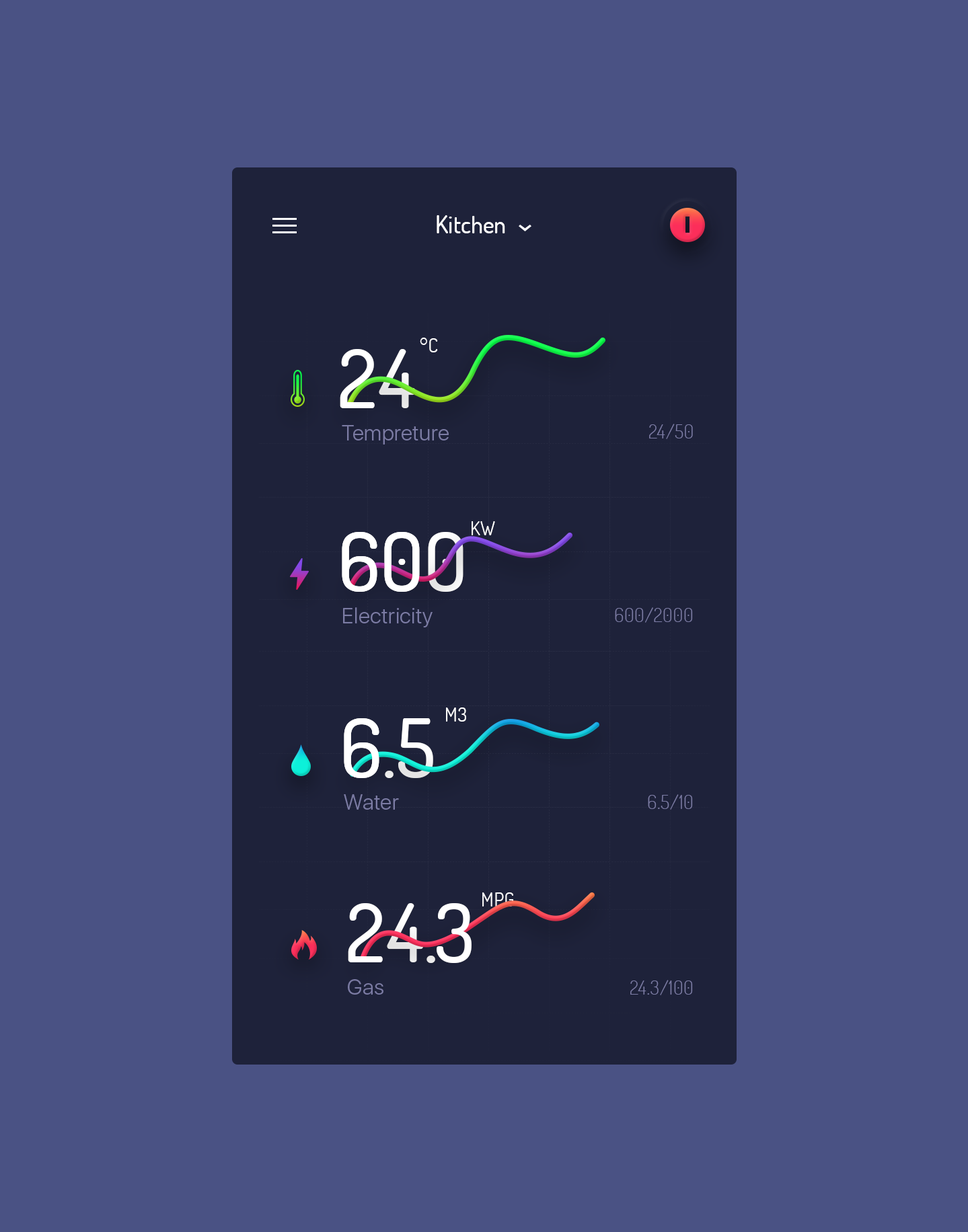
<style>
.page{position:relative;width:968px;height:1232px;background:#4a5284}
.page>*{position:absolute;margin:0}
.t1{font:24.2px "Dosis-Medium";color:#ffffff}
.t2{font:18.8px "Dosis-Regular";letter-spacing:0.02em;color:#ffffff}
.t3{font:80.7px "Dosis-Medium";color:#ffffff}
.t4{font:80.7px "Dosis-Medium"}
.t5{font:21.5px "SFUIDisplay-Light";letter-spacing:0.02em;color:#7c7ca5}
.t6{font:18.8px "Dosis-Light";letter-spacing:0.02em;color:#7c7ca5}
</style>
<div class="page">
<p class="t1" style="left:436px;top:215px;width:69px;height:18px">Kitchen</p>
<p class="t2" style="left:420px;top:338px;width:18px;height:14px">°C</p>
<p class="t3" style="left:340px;top:349px;width:35px;height:59px">2</p>
<p class="t4" style="left:379px;top:349px;width:37px;height:59px">4</p>
<p class="t5" style="left:342px;top:425px;width:107px;height:20px">Tempreture</p>
<p class="t6" style="left:649px;top:424px;width:44px;height:15px">24/50</p>
<p class="t2" style="left:471px;top:521px;width:24px;height:14px">KW</p>
<p class="t3" style="left:342px;top:532px;width:121px;height:60px">600</p>
<p class="t3" style="left:342px;top:532px;width:35px;height:60px">6</p>
<p class="t3" style="left:384px;top:532px;width:36px;height:60px">0</p>
<p class="t5" style="left:343px;top:607px;width:89px;height:20px">Electricity</p>
<p class="t6" style="left:615px;top:607px;width:78px;height:16px">600/2000</p>
<p class="t2" style="left:446px;top:708px;width:20px;height:14px">M3</p>
<p class="t3" style="left:344px;top:718px;width:89px;height:60px">6.5</p>
<p class="t3" style="left:344px;top:718px;width:35px;height:60px">6</p>
<p class="t5" style="left:344px;top:794px;width:55px;height:16px">Water</p>
<p class="t6" style="left:648px;top:794px;width:45px;height:16px">6.5/10</p>
<p class="t2" style="left:482px;top:892px;width:32px;height:15px">MPG</p>
<p class="t3" style="left:348px;top:903px;width:35px;height:59px">2</p>
<p class="t4" style="left:387px;top:903px;width:48px;height:60px">4.</p>
<p class="t3" style="left:436px;top:903px;width:35px;height:60px">3</p>
<p class="t5" style="left:348px;top:979px;width:35px;height:16px">Gas</p>
<p class="t6" style="left:630px;top:980px;width:63px;height:15px">24.3/100</p>
</div>
